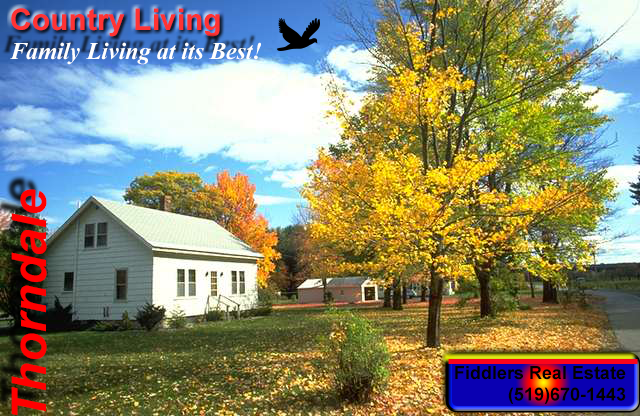
<style>
.page{position:relative;width:640px;height:416px}
.page>*{position:absolute;margin:0}
.t1{font:30px "Arial-BoldMT";color:#ff3333}
.t2{font:24px "TimesNewRomanPS-BoldItalicMT";color:#fefefe}
.t3{font:47.8px "Arial-BoldItalicMT";color:#ff0000}
.t4{font:18px "Arial-BoldMT";color:#030000}
</style>
<div class="page">
<p class="t1" style="left:11px;top:8px;width:209px;height:29px">Country Living</p>
<p class="t2" style="left:10px;top:42px;width:251px;height:23px">Family Living at its Best!</p>
<p class="t3" style="left:11px;top:189px;width:36px;height:227px;rotate:-90deg">Thorndale</p>
<p class="t4" style="left:455px;top:366px;width:171px;height:38px;text-align:right">Fiddlers Real Estate<br>(519)670-1443</p>
</div>
